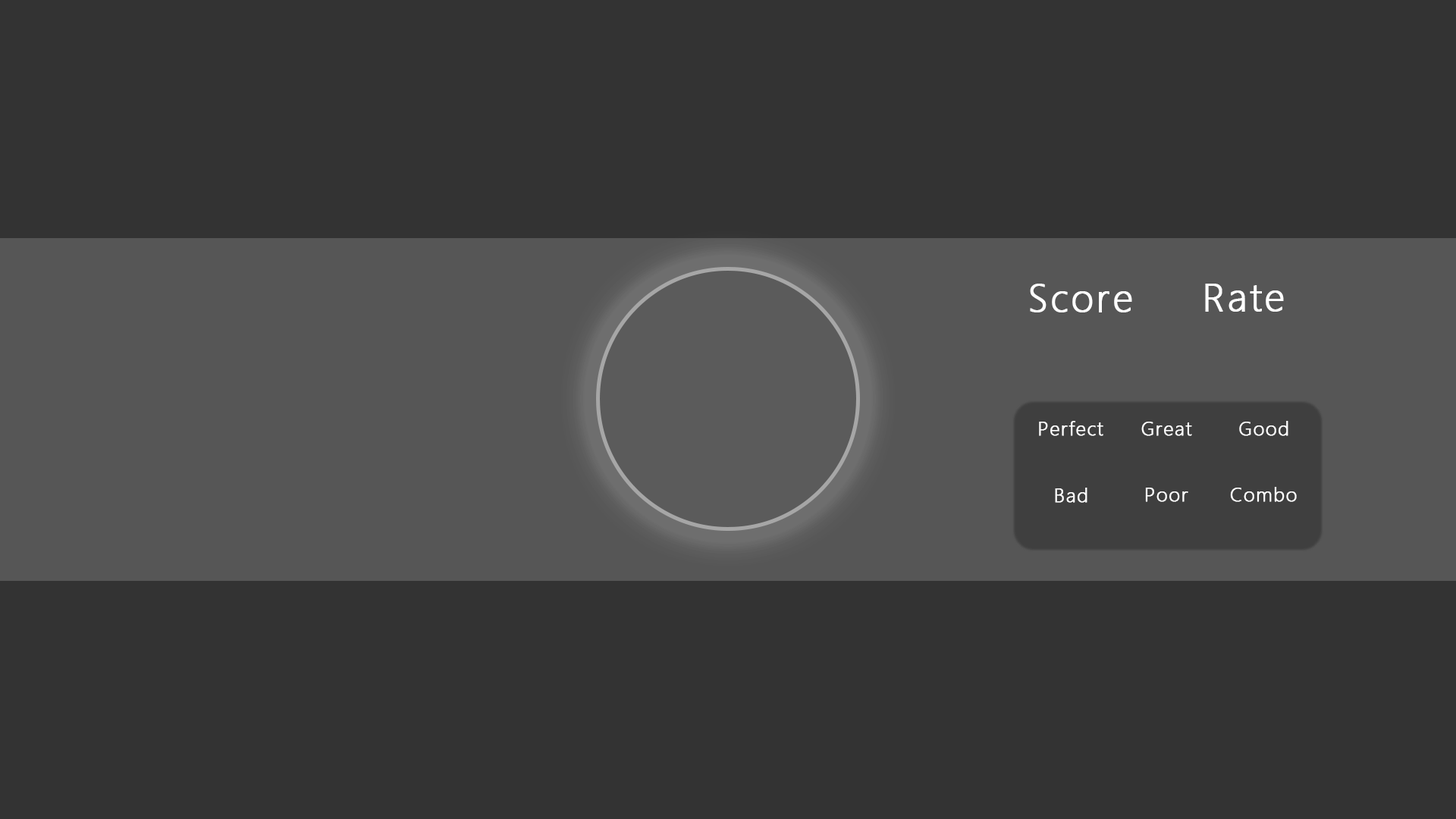
<style>
.page{position:relative;width:1456px;height:819px;background:#333333}
.page>*{position:absolute;margin:0}
.t1{font:39.5px "SegoeUI-Light";letter-spacing:0.05em;color:#ffffff;font-weight:bold}
.t2{font:19.5px "SegoeUI-Light";letter-spacing:0.05em;color:#ffffff;font-weight:bold}
</style>
<div class="page">
<p class="t1" style="left:1030px;top:284px;width:102px;height:28px">Score</p>
<p class="t1" style="left:1205px;top:284px;width:79px;height:28px">Rate</p>
<p class="t2" style="left:1039px;top:421px;width:64px;height:15px">Perfect</p>
<p class="t2" style="left:1141px;top:422px;width:51px;height:14px">Great</p>
<p class="t2" style="left:1239px;top:421px;width:49px;height:15px">Good</p>
<p class="t2" style="left:1055px;top:488px;width:32px;height:15px">Bad</p>
<p class="t2" style="left:1145px;top:488px;width:43px;height:14px">Poor</p>
<p class="t2" style="left:1230px;top:487px;width:67px;height:15px">Combo</p>
</div>
